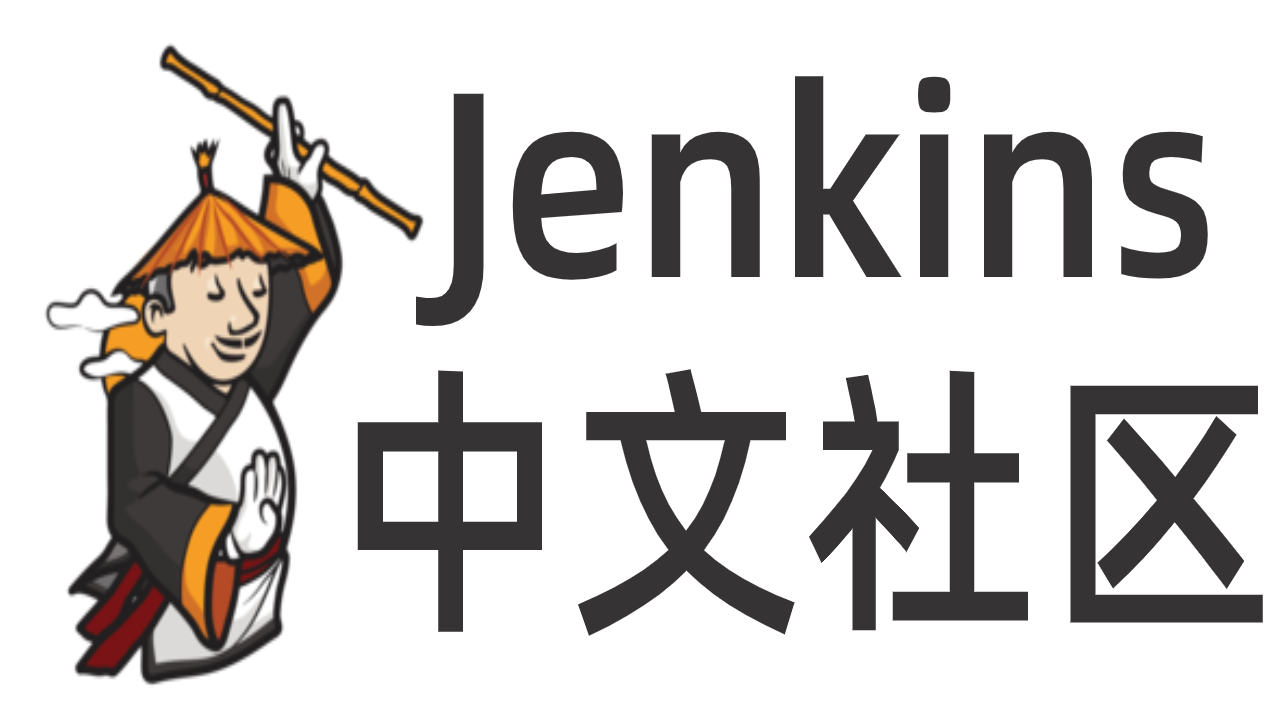
<style>
.page{position:relative;width:1280px;height:720px;background:#ffffff}
.page>*{position:absolute;margin:0}
.t1{font:264px "AlibabaPuHuiTi-Medium";color:#353333;scale:0.86 1}
.t2{font:288.2px "AlibabaPuHuiTi-Medium";color:#353333;scale:0.83 1}
</style>
<div class="page">
<p class="t1" style="left:415px;top:76px;width:793px;height:251px">Jenkins</p>
<p class="t2" style="left:357px;top:369px;width:906px;height:267px">中文社区</p>
</div>
